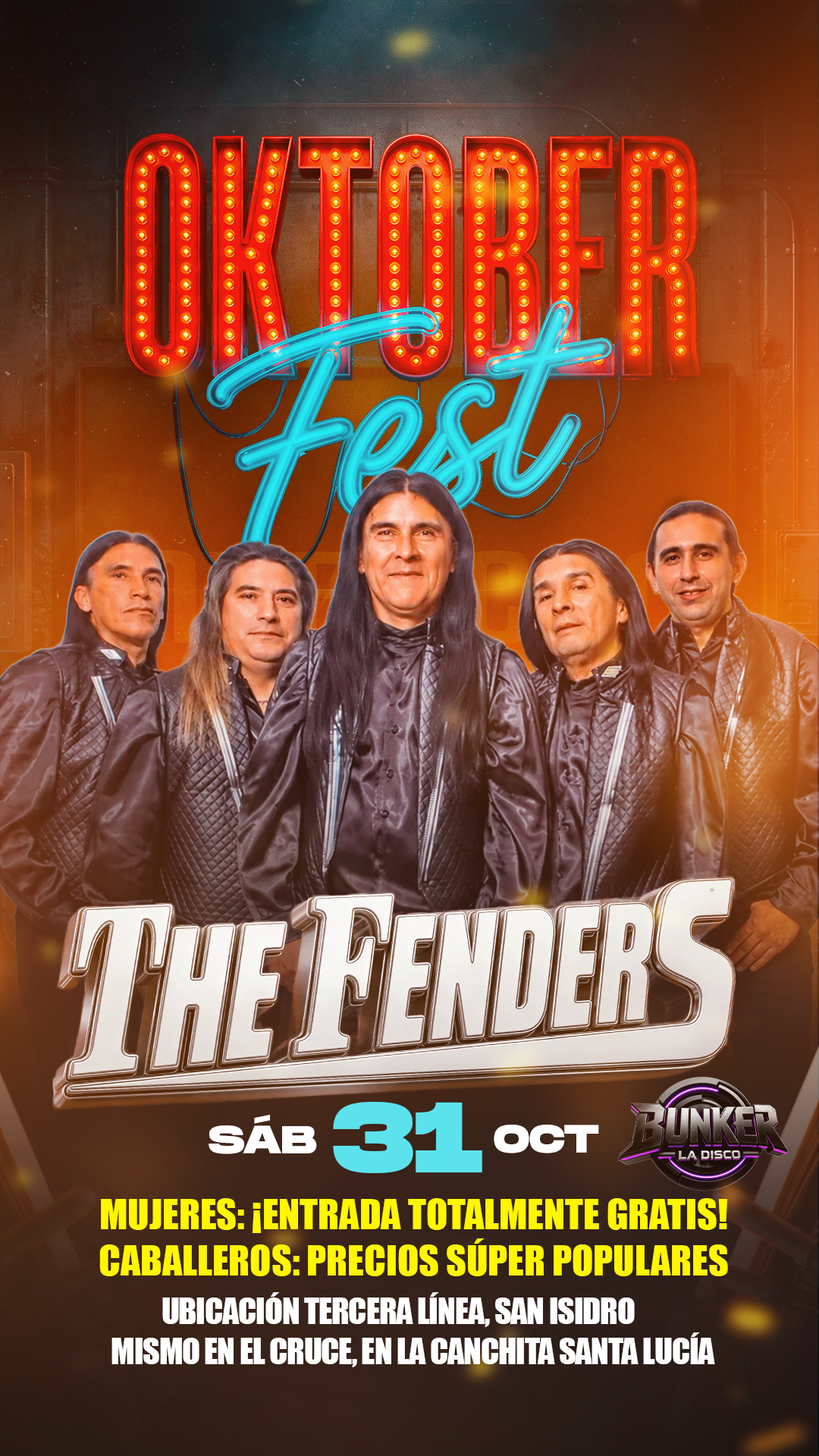
<style>
.page{position:relative;width:819px;height:1456px}
.page>*{position:absolute;margin:0}
.t1{font:99.8px "MonumentExtended-Ultrabold";color:#5ce2ec;text-transform:uppercase}
.t2{font:39.3px "MonumentExtended-Ultrabold";color:#ffffff;text-transform:uppercase}
.t3{font:38.8px "Impact";color:#fff600;text-transform:uppercase}
.t4{font:33px "Impact";letter-spacing:-0.025em;color:#ffffff;text-transform:uppercase}
</style>
<div class="page">
<p class="t1" style="left:333px;top:1102px;width:149px;height:71px">31</p>
<p class="t2" style="left:209px;top:1115px;width:108px;height:39px">SÁB</p>
<p class="t2" style="left:494px;top:1125px;width:105px;height:28px">OCT</p>
<p class="t3" style="left:99px;top:1198px;width:629px;height:78px;text-align:center">MUJERES: ¡ENTRADA TOTALMENTE GRATIS!<br>CABALLEROS: Precios Súper Populares</p>
<p class="t4" style="left:111px;top:1292px;width:604px;height:75px;text-align:justify">Ubicación Tercera Línea, San Isidro <br>Mismo en el cruce, en La Canchita Santa Lucía</p>
</div>
